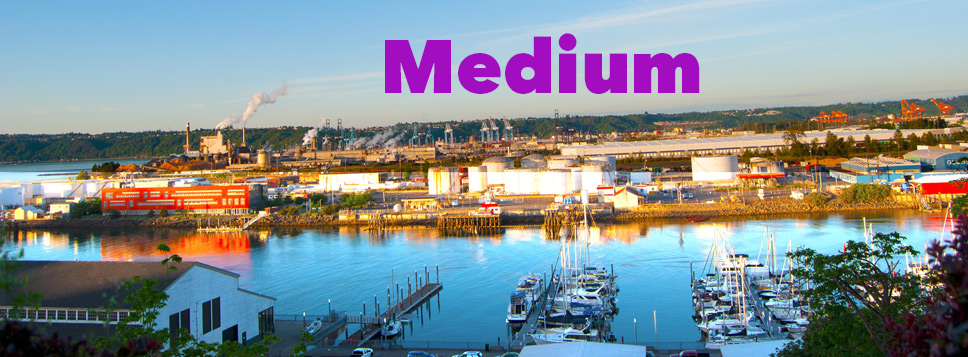
<style>
.page{position:relative;width:968px;height:357px}
.page>*{position:absolute;margin:0}
.t1{font:75px "AvenirNextLTPro-Heavy";color:#a20dc0}
</style>
<div class="page">
<p class="t1" style="left:385px;top:33px;width:315px;height:61px">Medium</p>
</div>
